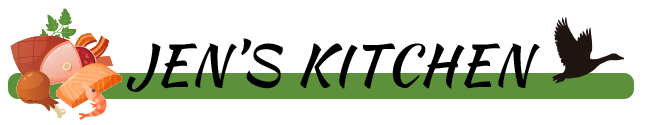
<style>
.page{position:relative;width:660px;height:125px;background:#ffffff}
.page>*{position:absolute;margin:0}
.t1{font:55px "KaushanScript-Regular";letter-spacing:0.025em;color:#000000;text-transform:uppercase}
</style>
<div class="page">
<p class="t1" style="left:127px;top:38px;width:413px;height:54px">Jen’s kitchen</p>
</div>
